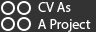
<style>
.page{position:relative;width:96px;height:32px;background:#333333}
.page>*{position:absolute;margin:0}
.t1{font:14px "MyriadPro-Regular";color:#ffffff}
</style>
<div class="page">
<p class="t1" style="left:38px;top:2px;width:53px;height:30px">CV As<br>A Project</p>
</div>
